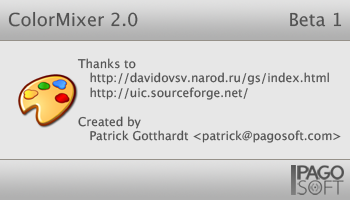
<style>
.page{position:relative;width:350px;height:200px;background:#e7e7e7}
.page>*{position:absolute;margin:0}
.t1{font:18px "LucidaSans";color:#525252}
.t2{font:12px "LucidaSans";color:#525252}
</style>
<div class="page">
<p class="t1" style="left:8px;top:11px;width:334px;height:16px">ColorMixer 2.0         Beta 1</p>
<p class="t2" style="left:77px;top:58px;width:264px;height:85px">Thanks to<br>   http://davidovsv.narod.ru/gs/index.html<br>   http://uic.sourceforge.net/<br><br>Created by<br>   Patrick Gotthardt &lt;patrick@pagosoft.com&gt;</p>
</div>
